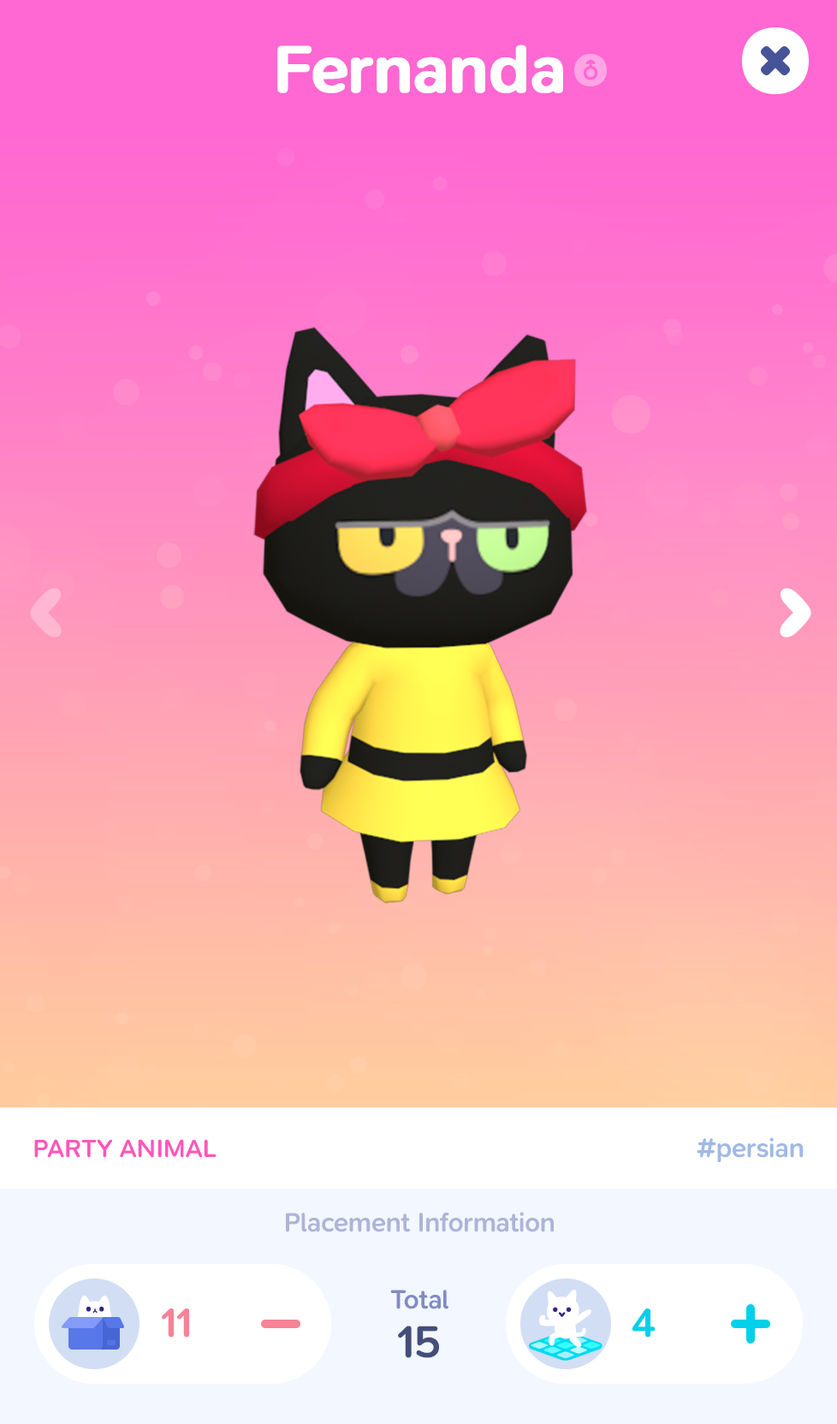
<style>
.page{position:relative;width:837px;height:1424px}
.page>*{position:absolute;margin:0}
.t1{font:68.5px "SNPro-SemiBold";letter-spacing:-0.01em;color:#ffffff;font-weight:bold}
.t2{font:25.7px "SNPro-SemiBold";letter-spacing:-0.01em;color:#ff56ba;text-transform:uppercase}
.t3{font:27.4px "SNPro-SemiBold";letter-spacing:-0.01em;color:#a0b9e6}
.t4{font:27.4px "SNPro-SemiBold";letter-spacing:-0.01em;color:#adb4d7}
.t5{font:27.4px "SNPro-SemiBold";letter-spacing:-0.01em;color:#818cc2}
.t6{font:41.7px "SNPro-SemiBold";letter-spacing:-0.01em;color:#f88296}
.t7{font:41.7px "SNPro-SemiBold";letter-spacing:-0.01em;color:#00d0e9}
.t8{font:46.2px "SNPro-SemiBold";letter-spacing:-0.01em;color:#454e7b}
</style>
<div class="page">
<p class="t1" style="left:277px;top:45px;width:286px;height:48px">Fernanda</p>
<p class="t2" style="left:34px;top:1139px;width:183px;height:19px">Party Animal</p>
<p class="t3" style="left:697px;top:1138px;width:107px;height:24px">#persian</p>
<p class="t4" style="left:286px;top:1212px;width:268px;height:21px">Placement Information</p>
<p class="t5" style="left:390px;top:1290px;width:59px;height:20px">Total</p>
<p class="t6" style="left:162px;top:1309px;width:27px;height:29px">11</p>
<p class="t7" style="left:632px;top:1309px;width:24px;height:29px">4</p>
<p class="t8" style="left:398px;top:1326px;width:41px;height:32px">15</p>
</div>
